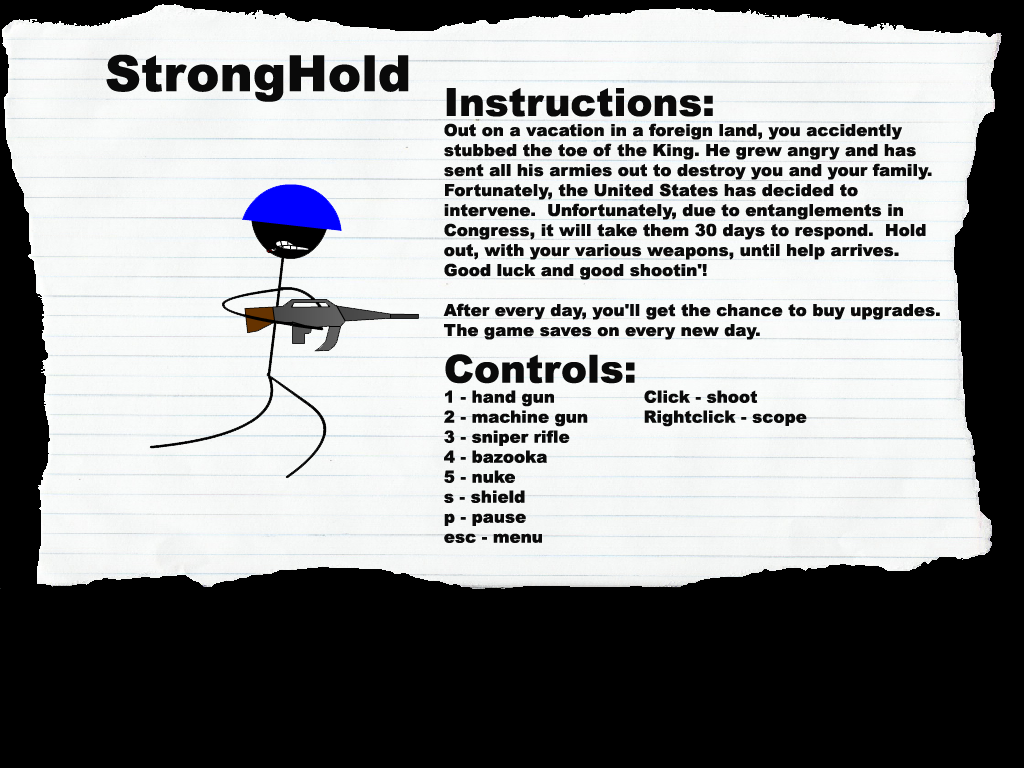
<style>
.page{position:relative;width:1024px;height:768px;background:#000000}
.page>*{position:absolute;margin:0}
.t1{font:16.7px "Arial-Black";color:#0a0a0a}
.t2{font:38.9px "Arial-Black";color:#0a0a0a}
</style>
<div class="page">
<p class="t1" style="left:443px;top:88px;width:497px;height:455px"><span class="t2">Instructions:<br></span>Out on a vacation in a foreign land, you accidently <br>stubbed the toe of the King. He grew angry and has <br>sent all his armies out to destroy you and your family.  <br>Fortunately, the United States has decided to <br>intervene.  Unfortunately, due to entanglements in <br>Congress, it will take them 30 days to respond.  Hold <br>out, with your various weapons, until help arrives.<br>Good luck and good shootin'!<br><br>After every day, you'll get the chance to buy upgrades.<br>The game saves on every new day.<br><span class="t2">Controls:<br></span>1 - hand gun                Click - shoot<br>2 - machine gun          Rightclick - scope<br>3 - sniper rifle <br>4 - bazooka<br>5 - nuke<br>s - shield<br>p - pause<br>esc - menu</p>
</div>
